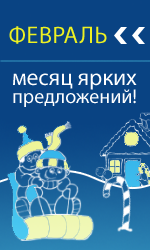
<style>
.page{position:relative;width:150px;height:250px;background:#094383}
.page>*{position:absolute;margin:0}
.t1{font:24px "MyriadPro-Regular";color:#edf122;text-transform:uppercase}
.t2{font:20px/18px "MyriadPro-Regular";color:#ffffff}
.t3{font:23px/18px "MyriadPro-Regular";color:#ffffff}
</style>
<div class="page">
<p class="t1" style="left:9px;top:26px;width:98px;height:18px">февраль</p>
<p class="t2" style="left:13px;top:73px;width:124px;height:34px"><span class="t3">месяц ярких <br></span>предложений!</p>
</div>
